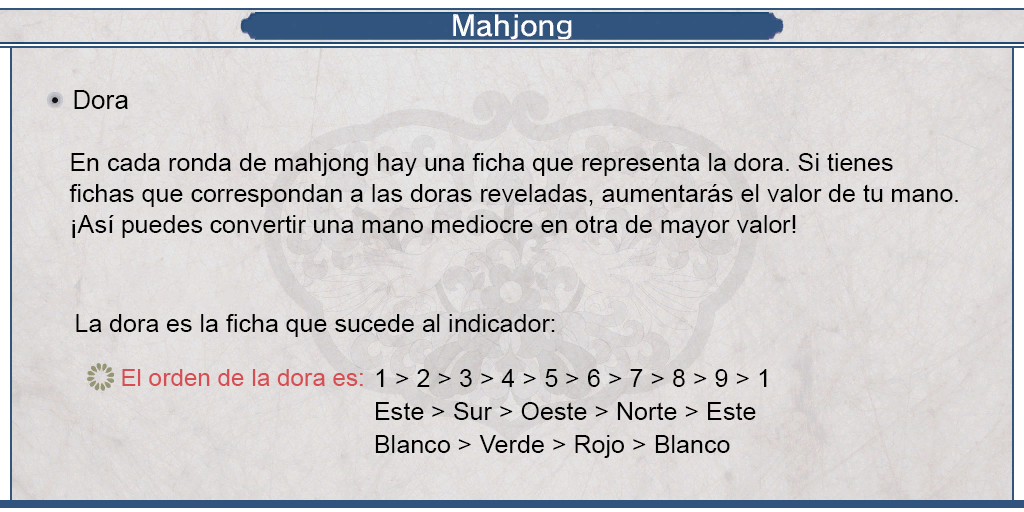
<style>
.page{position:relative;width:1024px;height:512px}
.page>*{position:absolute;margin:0}
.t1{font:26px "ArialMT";color:#000000}
.t2{font:25px/31px "ArialMT";color:#000000}
.t3{font:25px "ArialMT";color:#000000}
.t4{font:24px "ArialMT";color:#d64d52}
.t5{font:25.1px/33px "ArialMT";color:#000000}
</style>
<div class="page">
<p class="t1" style="left:74px;top:90px;width:54px;height:19px">Dora</p>
<p class="t2" style="left:69px;top:153px;width:889px;height:85px;text-align:justify">En cada ronda de mahjong hay una ficha que representa la dora. Si tienes <br>fichas que correspondan a las doras reveladas, aumentarás el valor de tu mano. <br>¡Así puedes convertir una mano mediocre en otra de mayor valor!</p>
<p class="t3" style="left:76px;top:314px;width:479px;height:23px">La dora es la ficha que sucede al indicador:</p>
<p class="t4" style="left:122px;top:369px;width:241px;height:17px">El orden de la dora es:</p>
<p class="t5" style="left:375px;top:369px;width:392px;height:89px;text-align:justify">1 &gt; 2 &gt; 3 &gt; 4 &gt; 5 &gt; 6 &gt; 7 &gt; 8 &gt; 9 &gt; 1<br>Este &gt; Sur &gt; Oeste &gt; Norte &gt; Este<br>Blanco &gt; Verde &gt; Rojo &gt; Blanco</p>
</div>
